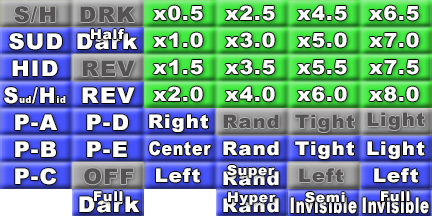
<style>
.page{position:relative;width:432px;height:216px}
.page>*{position:absolute;margin:0}
.t1{font:21.6px "Arial-Black";letter-spacing:0.05em;color:#545252;scale:1.04 1}
.t2{font:19.4px "Arial-Black";letter-spacing:0.05em;color:#ffffff;scale:1.04 1}
.t3{font:13.5px "Arial-Black";letter-spacing:0.05em;color:#ffffff;scale:1.04 1}
.t4{font:21.6px "Arial-Black";letter-spacing:0.05em;color:#ffffff;scale:1.04 1}
.t5{font:9.6px "Arial-Black";letter-spacing:0.05em;color:#ffffff;scale:0.94 1}
.t6{font:21.6px "Arial-Black";letter-spacing:0.05em;color:#ffffff;scale:0.94 1}
.t7{font:18.9px "Arial-Black";letter-spacing:0.05em;color:#545252;scale:1.04 1}
.t8{font:18.9px "Arial-Black";letter-spacing:0.05em;color:#ffffff;scale:1.04 1}
.t9{font:18.9px "Arial-Black";letter-spacing:0.05em;color:#ffffff;scale:0.83 1}
.t10{font:21.6px "Arial-Black";letter-spacing:0.05em;color:#ffffff;scale:0.62 1}
</style>
<div class="page">
<p class="t1" style="left:14px;top:6px;width:42px;height:17px">S/H</p>
<p class="t1" style="left:80px;top:6px;width:55px;height:16px">DRK</p>
<p class="t2" style="left:153px;top:5px;width:50px;height:16px">x0.5</p>
<p class="t2" style="left:225px;top:5px;width:50px;height:16px">x2.5</p>
<p class="t2" style="left:297px;top:5px;width:50px;height:16px">x4.5</p>
<p class="t2" style="left:369px;top:5px;width:50px;height:16px">x6.5</p>
<p class="t3" style="left:91px;top:29px;width:33px;height:11px">Half</p>
<p class="t4" style="left:9px;top:33px;width:53px;height:17px">SUD</p>
<p class="t4" style="left:77px;top:33px;width:61px;height:17px">Dark</p>
<p class="t2" style="left:153px;top:32px;width:50px;height:16px">x1.0</p>
<p class="t2" style="left:225px;top:32px;width:50px;height:16px">x3.0</p>
<p class="t2" style="left:297px;top:32px;width:50px;height:16px">x5.0</p>
<p class="t2" style="left:369px;top:32px;width:50px;height:16px">x7.0</p>
<p class="t4" style="left:12px;top:60px;width:46px;height:16px">HID</p>
<p class="t1" style="left:82px;top:60px;width:53px;height:16px">REV</p>
<p class="t2" style="left:153px;top:59px;width:50px;height:16px">x1.5</p>
<p class="t2" style="left:225px;top:59px;width:50px;height:16px">x3.5</p>
<p class="t2" style="left:297px;top:60px;width:50px;height:15px">x5.5</p>
<p class="t2" style="left:369px;top:60px;width:50px;height:15px">x7.5</p>
<p class="t5" style="left:4px;top:87px;width:62px;height:17px"><span class="t6">S</span>ud<span class="t6">/H</span>id</p>
<p class="t4" style="left:82px;top:87px;width:53px;height:16px">REV</p>
<p class="t2" style="left:153px;top:86px;width:50px;height:16px">x2.0</p>
<p class="t2" style="left:225px;top:86px;width:50px;height:16px">x4.0</p>
<p class="t2" style="left:297px;top:86px;width:50px;height:16px">x6.0</p>
<p class="t2" style="left:369px;top:86px;width:50px;height:16px">x8.0</p>
<p class="t7" style="left:367px;top:112px;width:58px;height:18px">Light</p>
<p class="t4" style="left:15px;top:114px;width:42px;height:16px">P-A</p>
<p class="t4" style="left:87px;top:114px;width:41px;height:16px">P-D</p>
<p class="t8" style="left:149px;top:114px;width:59px;height:18px">Right</p>
<p class="t7" style="left:223px;top:114px;width:56px;height:15px">Rand</p>
<p class="t7" style="left:295px;top:114px;width:59px;height:18px">Tight</p>
<p class="t4" style="left:15px;top:141px;width:41px;height:16px">P-B</p>
<p class="t4" style="left:87px;top:141px;width:40px;height:16px">P-E</p>
<p class="t9" style="left:149px;top:141px;width:62px;height:15px">Center</p>
<p class="t8" style="left:223px;top:141px;width:56px;height:15px">Rand</p>
<p class="t8" style="left:295px;top:141px;width:59px;height:18px">Tight</p>
<p class="t8" style="left:367px;top:141px;width:58px;height:18px">Light</p>
<p class="t4" style="left:15px;top:168px;width:42px;height:17px">P-C</p>
<p class="t1" style="left:84px;top:168px;width:50px;height:17px">OFF</p>
<p class="t8" style="left:156px;top:168px;width:44px;height:15px">Left</p>
<p class="t8" style="left:223px;top:171px;width:56px;height:15px">Rand</p>
<p class="t3" style="left:227px;top:165px;width:48px;height:13px">Super</p>
<p class="t7" style="left:299px;top:168px;width:44px;height:15px">Left</p>
<p class="t8" style="left:374px;top:168px;width:44px;height:15px">Left</p>
<p class="t4" style="left:79px;top:196px;width:61px;height:17px">Dark</p>
<p class="t3" style="left:94px;top:191px;width:29px;height:11px">Full</p>
<p class="t8" style="left:223px;top:198px;width:56px;height:15px">Rand</p>
<p class="t3" style="left:228px;top:192px;width:48px;height:13px">Hyper</p>
<p class="t10" style="left:290px;top:197px;width:67px;height:17px">Invisible</p>
<p class="t3" style="left:305px;top:192px;width:40px;height:11px">Semi</p>
<p class="t10" style="left:362px;top:197px;width:67px;height:17px">Invisible</p>
<p class="t3" style="left:381px;top:191px;width:29px;height:11px">Full</p>
</div>
